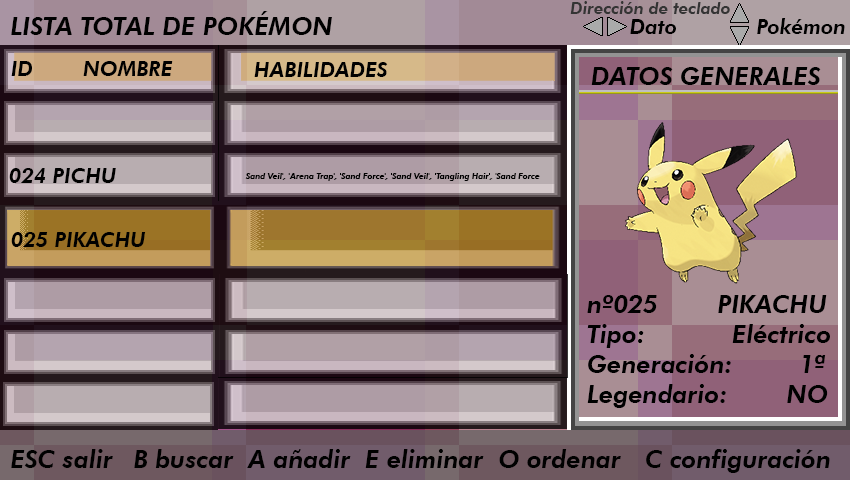
<style>
.page{position:relative;width:850px;height:480px}
.page>*{position:absolute;margin:0}
.t1{font:16.7px "FuturaBT-HeavyItalic";color:#343434}
.t2{font:25px "FuturaBT-HeavyItalic";color:#000000}
.t3{font:20.8px "FuturaBT-HeavyItalic";color:#000000}
.t4{font:8.3px "FuturaBT-HeavyItalic";color:#000000}
</style>
<div class="page">
<p class="t1" style="left:570px;top:1px;width:160px;height:13px">Dirección de teclado</p>
<p class="t2" style="left:11px;top:11px;width:321px;height:24px">LISTA TOTAL DE POKÉMON</p>
<p class="t3" style="left:630px;top:18px;width:215px;height:16px">Dato     Pokémon</p>
<p class="t3" style="left:11px;top:61px;width:162px;height:15px">ID   NOMBRE</p>
<p class="t3" style="left:254px;top:62px;width:134px;height:15px">HABILIDADES</p>
<p class="t2" style="left:591px;top:67px;width:230px;height:18px">DATOS GENERALES</p>
<p class="t3" style="left:9px;top:168px;width:107px;height:15px">024 PICHU</p>
<p class="t4" style="left:245px;top:173px;width:295px;height:8px">Sand Veil', 'Arena Trap', 'Sand Force', 'Sand Veil', 'Tangling Hair', 'Sand Force</p>
<p class="t3" style="left:11px;top:232px;width:135px;height:15px">025 PIKACHU</p>
<p class="t2" style="left:587px;top:295px;width:243px;height:113px">nº025     PIKACHU<br>Tipo:        Eléctrico<br>Generación:         1ª<br>Legendario:        NO</p>
<p class="t2" style="left:11px;top:449px;width:819px;height:24px">ESC salir   B buscar  A añadir  E eliminar  O ordenar    C configuración</p>
</div>
